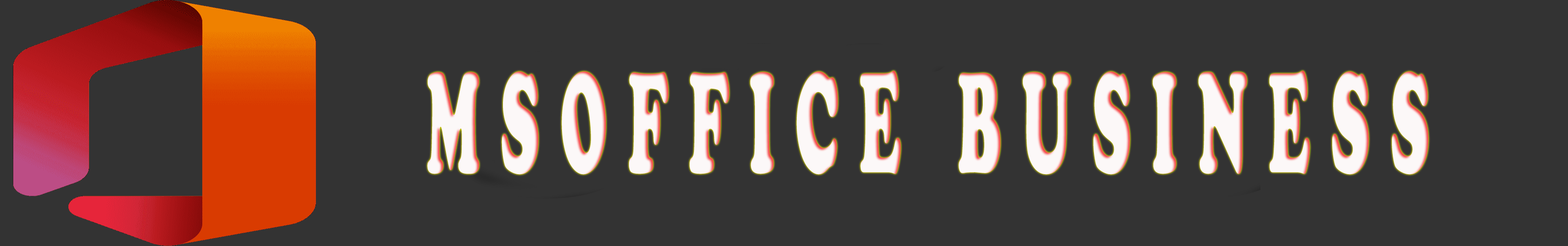
<style>
.page{position:relative;width:1568px;height:246px;background:#333333}
.page>*{position:absolute;margin:0}
.t1{font:148px "CooperBlack";letter-spacing:0.35em;color:#fcf8f8;text-transform:uppercase;scale:0.41 1}
</style>
<div class="page">
<p class="t1" style="left:427px;top:70px;width:1002px;height:105px">MSOFFICE BUSINESS</p>
</div>
